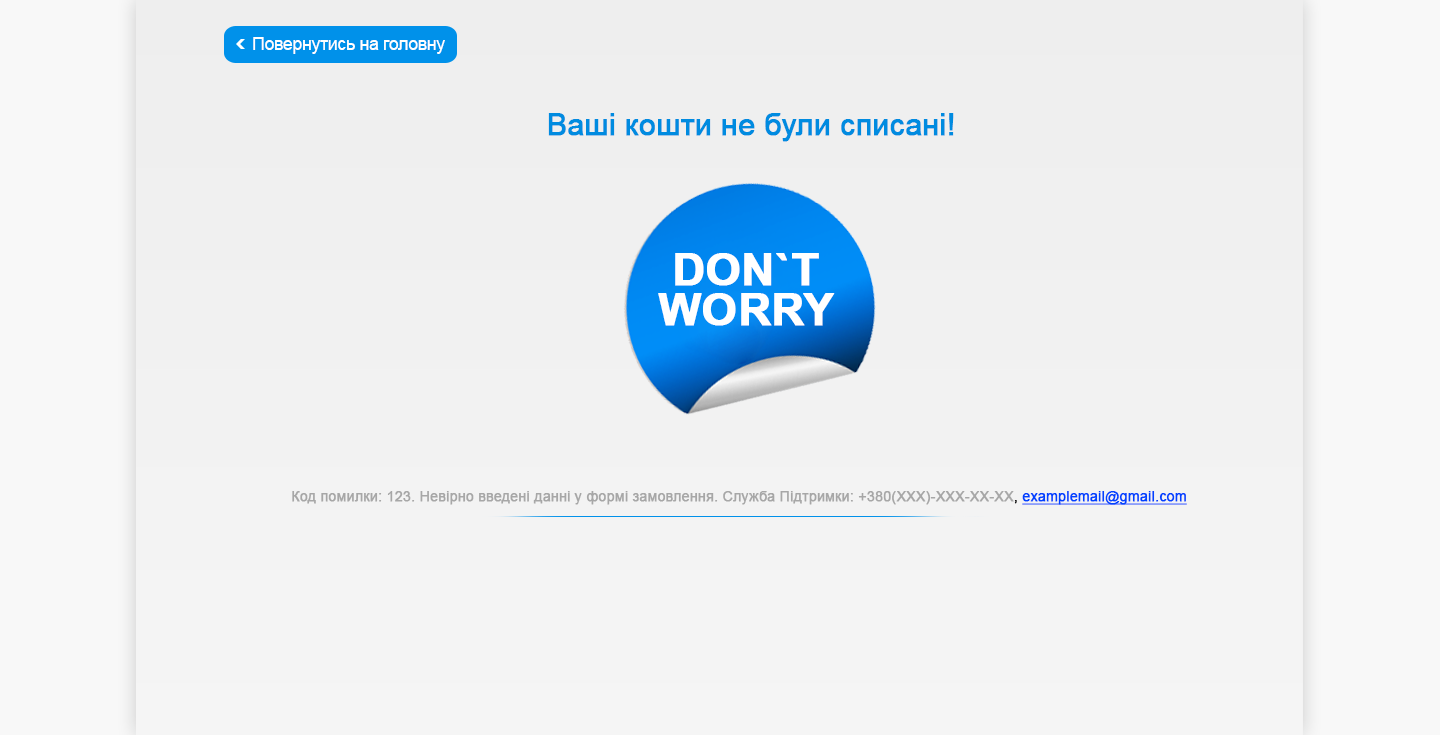
<style>
.page{position:relative;width:1440px;height:735px}
.page>*{position:absolute;margin:0}
.t1{font:18px "ArialMT";letter-spacing:-0.025em;color:#ffffff}
.t2{font:30px "ArialMT";letter-spacing:-0.01em;color:#008be0;font-weight:bold}
.t3{font:45px/40px "Arial-BoldMT";color:#ffffff;font-weight:bold}
.t4{font:14px "ArialMT";color:#a7a7a7;font-weight:bold}
.t5{font:14px "ArialMT";color:#171717;font-weight:bold}
.t6{font:14px "ArialMT";color:#0042ff;font-weight:bold;text-decoration:underline}
</style>
<div class="page">
<p class="t1" style="left:253px;top:37px;width:192px;height:17px">Повернутись на головну</p>
<p class="t2" style="left:548px;top:113px;width:406px;height:29px">Ваші кошти не були списані!</p>
<p class="t3" style="left:658px;top:253px;width:177px;height:73px;text-align:center">DON`T<br>WORRY</p>
<p class="t4" style="left:292px;top:491px;width:895px;height:14px">Код помилки: 123. Невірно введені данні у формі замовлення. Служба Підтримки: +380(ХХХ)-ХХХ-ХХ-ХХ<span class="t5">, </span><span class="t6">examplemail@gmail.com</span></p>
</div>
